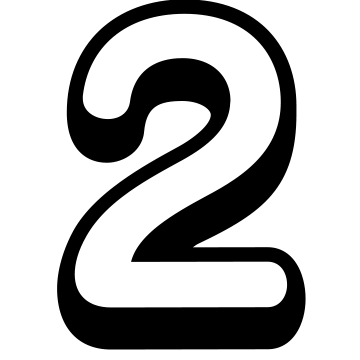
<style>
.page{position:relative;width:360px;height:360px;background:#ffffff}
.page>*{position:absolute;margin:0}
.t1{font:400px "ShadowTLStd-B";color:#000000}
</style>
<div class="page">
<p class="t1" style="left:57px;top:0px;width:249px;height:350px">2</p>
</div>
